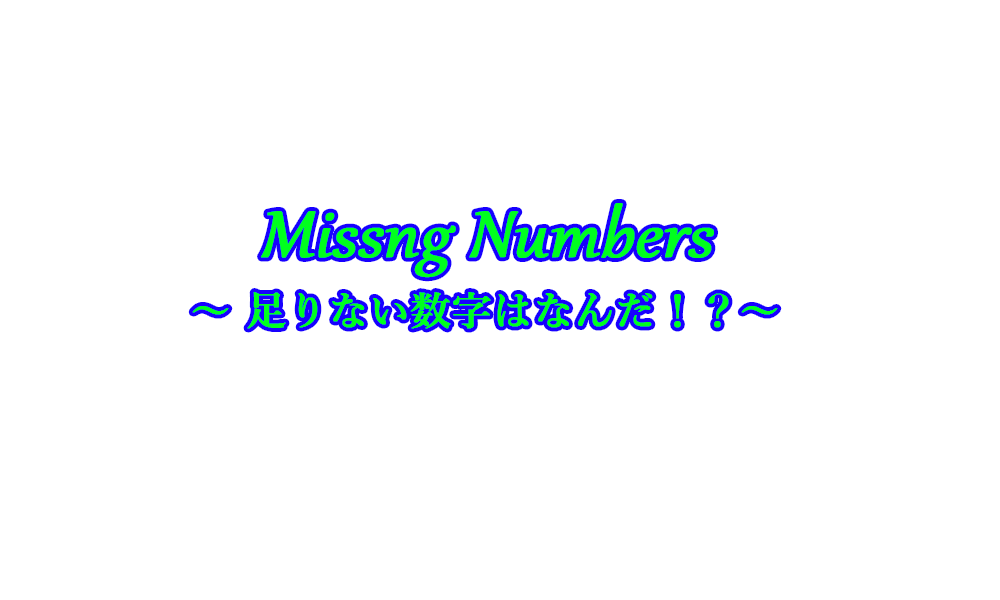
<style>
.page{position:relative;width:1000px;height:600px;background:#ffffff}
.page>*{position:absolute;margin:0}
.t1{font:40px/96px "YuMincho-Demibold";color:#00ff1e;font-weight:bold}
.t2{font:80px/96px "Gabriola";color:#00ff1e;font-weight:bold;font-style:italic}
</style>
<div class="page">
<p class="t1" style="left:192px;top:203px;width:586px;height:126px;text-align:center"><span class="t2">Missng Numbers<br></span>˜ 足りない数字はなんだ！？˜</p>
</div>
